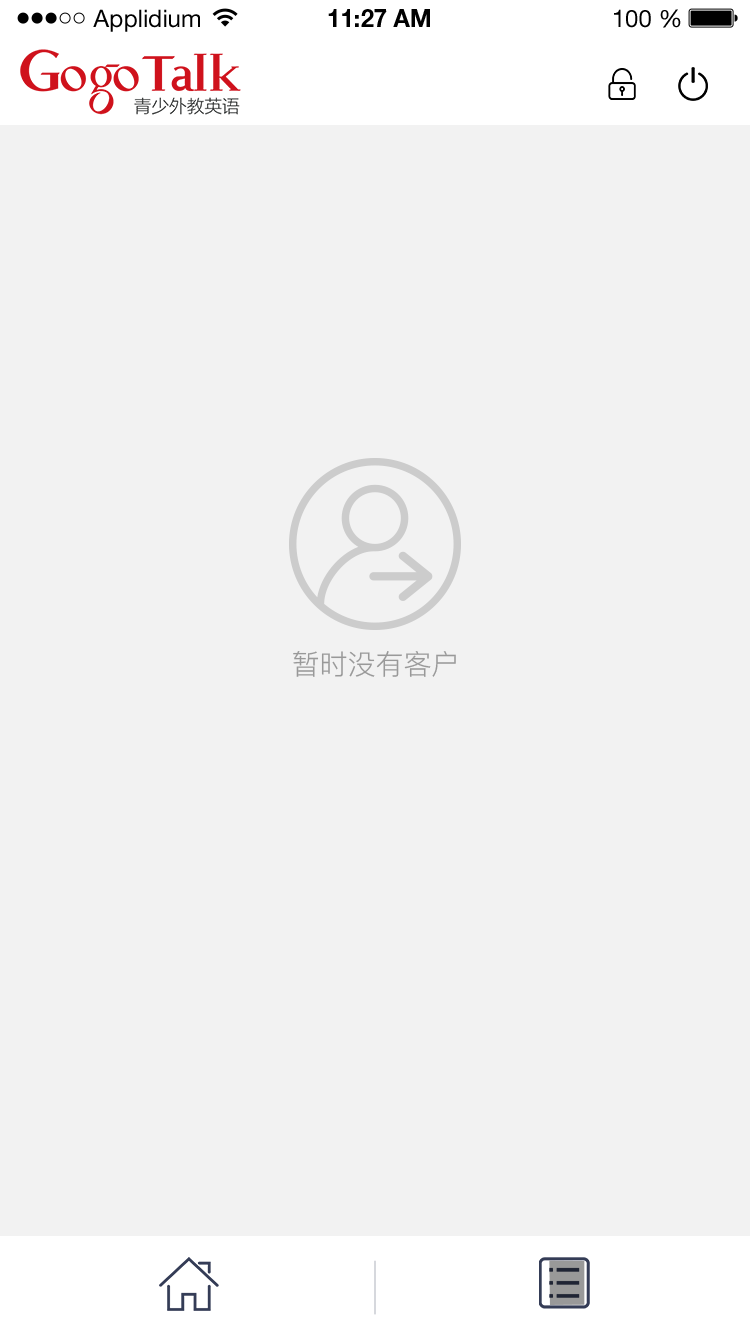
<style>
.page{position:relative;width:750px;height:1334px;background:#f2f2f2}
.page>*{position:absolute;margin:0}
.t1{font:24px "HelveticaNeueLTStd-Roman";color:#000000}
.t2{font:24px "HelveticaNeueLTStd-Bd";color:#000000}
.t3{font:28px "PingFang-SC-Regular";color:#999999}
</style>
<div class="page">
<p class="t1" style="left:93px;top:9px;width:107px;height:23px">Applidium</p>
<p class="t2" style="left:328px;top:9px;width:102px;height:18px">11:27 AM</p>
<p class="t1" style="left:614px;top:9px;width:67px;height:19px">100 %</p>
<p class="t3" style="left:293px;top:651px;width:163px;height:26px">暂时没有客户</p>
</div>
